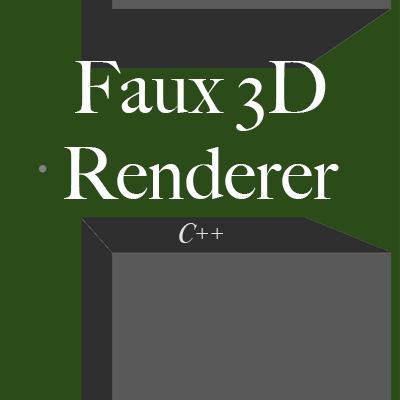
<style>
.page{position:relative;width:400px;height:400px;background:#2b4c19}
.page>*{position:absolute;margin:0}
.t1{font:72px "BigCaslon-Medium";color:#ffffff}
.t2{font:28px "BodoniSvtyTwoITCTT-BookIta";color:#e1e1e1}
</style>
<div class="page">
<p class="t1" style="left:64px;top:61px;width:275px;height:138px;text-align:center">Faux 3D<br>Renderer</p>
<p class="t2" style="left:179px;top:223px;width:44px;height:20px">C++</p>
</div>
